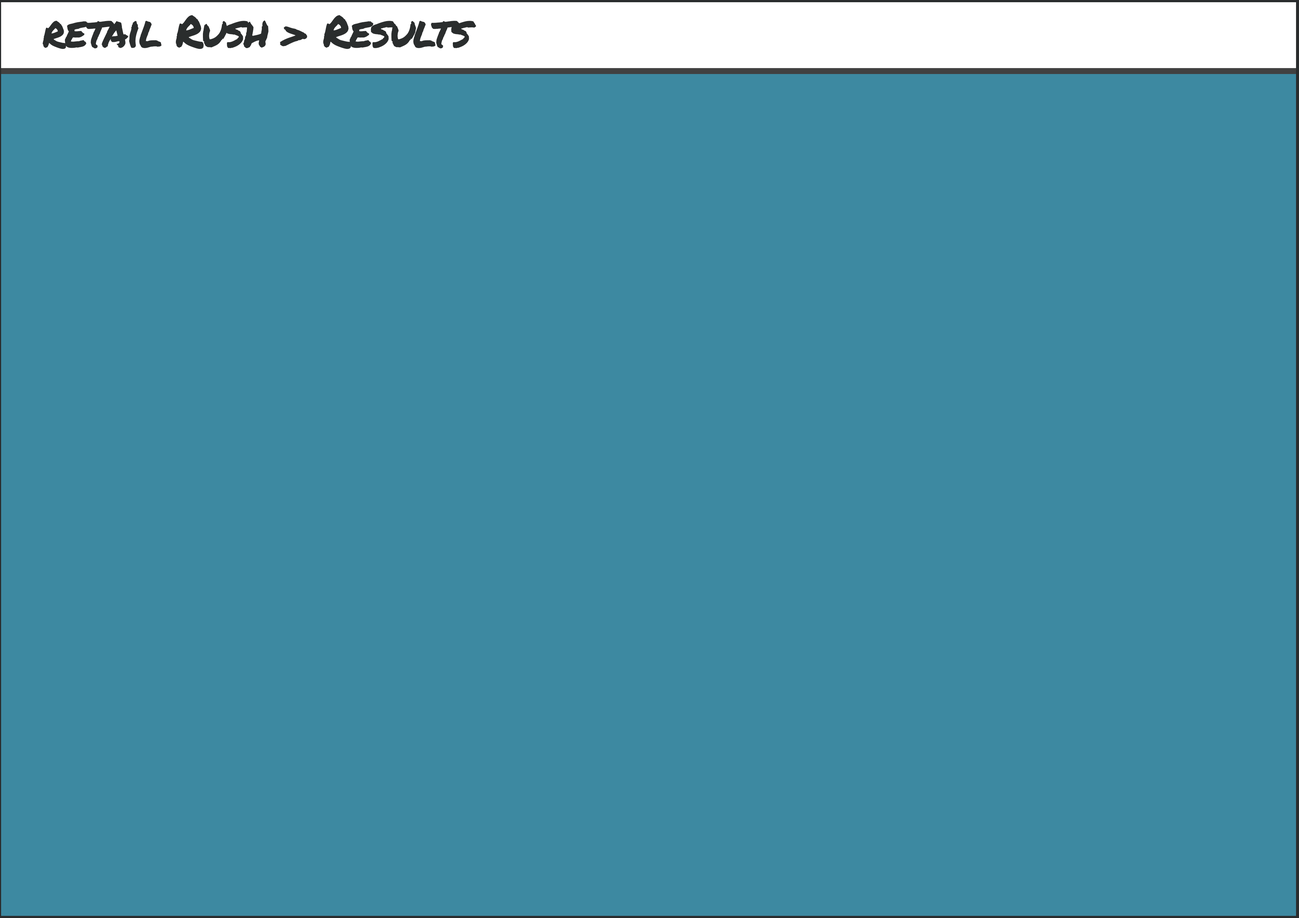
<style>
.page{position:relative;width:1299px;height:918px;background:#3d89a1}
.page>*{position:absolute;margin:0}
.t1{font:44px "PermanentMarker-Regular";letter-spacing:-0.04em;color:#2a2d2d}
</style>
<div class="page">
<p class="t1" style="left:43px;top:15px;width:433px;height:34px">retail Rush &gt; Results</p>
</div>
